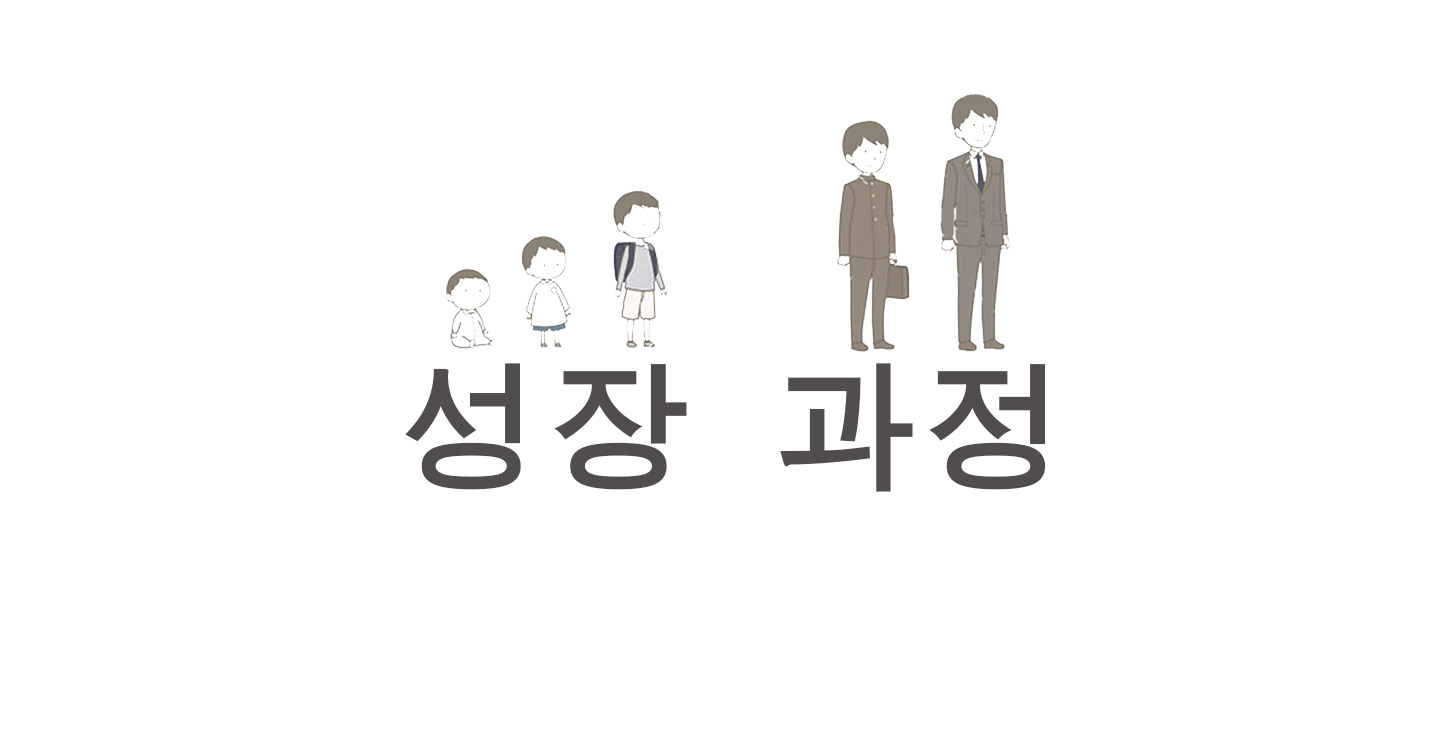
<style>
.page{position:relative;width:1440px;height:749px;background:#ffffff}
.page>*{position:absolute;margin:0}
.t1{font:150px "MJemokGothic";color:#514d4d}
</style>
<div class="page">
<p class="t1" style="left:405px;top:363px;width:641px;height:129px">성장 과정</p>
</div>
